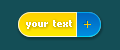
<style>
.page{position:relative;width:120px;height:50px;background:#144e56}
.page>*{position:absolute;margin:0}
.t1{font:10px "Tahoma-Bold";color:#ffffff}
</style>
<div class="page">
<p class="t1" style="left:26px;top:20px;width:46px;height:9px">your  text</p>
</div>
